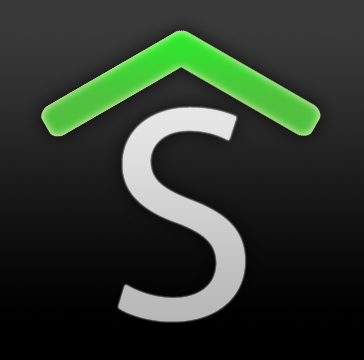
<style>
.page{position:relative;width:364px;height:360px}
.page>*{position:absolute;margin:0}
.t1{font:307.8px "MyriadPro-Regular"}
</style>
<div class="page">
<p class="t1" style="left:118px;top:107px;width:127px;height:214px">S</p>
</div>
